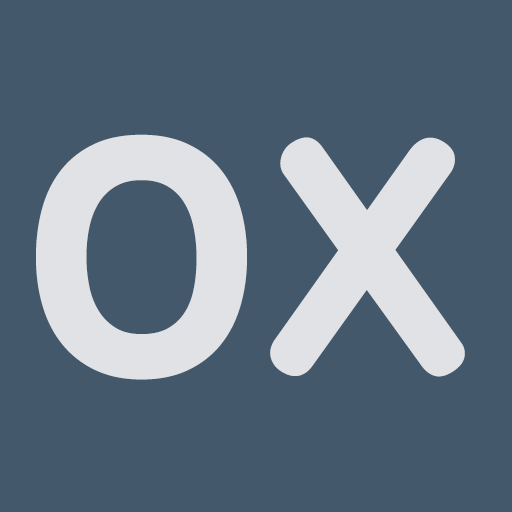
<style>
.page{position:relative;width:512px;height:512px;background:#43586a}
.page>*{position:absolute;margin:0}
.t1{font:320px "STYuanti-SC-Bold";letter-spacing:0.02em;color:#e1e2e5;font-weight:bold}
</style>
<div class="page">
<p class="t1" style="left:36px;top:134px;width:429px;height:246px">OX</p>
</div>
